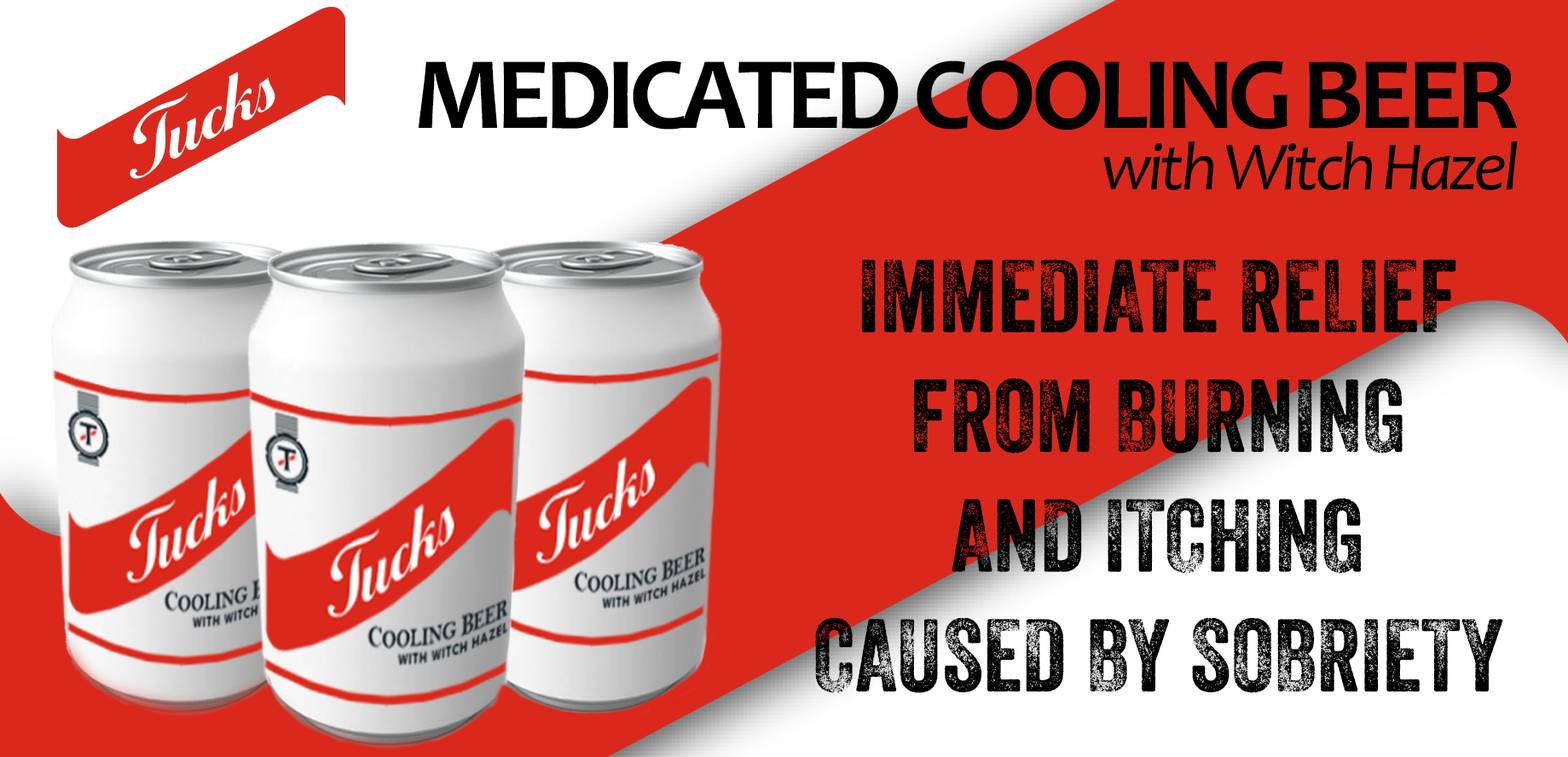
<style>
.page{position:relative;width:1568px;height:757px;background:#da291c}
.page>*{position:absolute;margin:0}
.t1{font:103.9px/61.5px "Candara-Bold";letter-spacing:-0.06em;color:#000000}
.t2{font:69.2px/61.5px "Candara-Italic";letter-spacing:-0.06em;color:#000000}
.t3{font:99.8px "VeneerThree";color:#000000}
</style>
<div class="page">
<p class="t1" style="left:419px;top:61px;width:1099px;height:129px;text-align:right">MEDICATED COOLING BEER<br><span class="t2">with Witch Hazel</span></p>
<p class="t3" style="left:815px;top:259px;width:688px;height:434px;text-align:center">IMMEDIATE RELIEF <br>FROM BURNING <br>AND ITCHING <br>CAUSED BY SOBRIETY</p>
</div>
